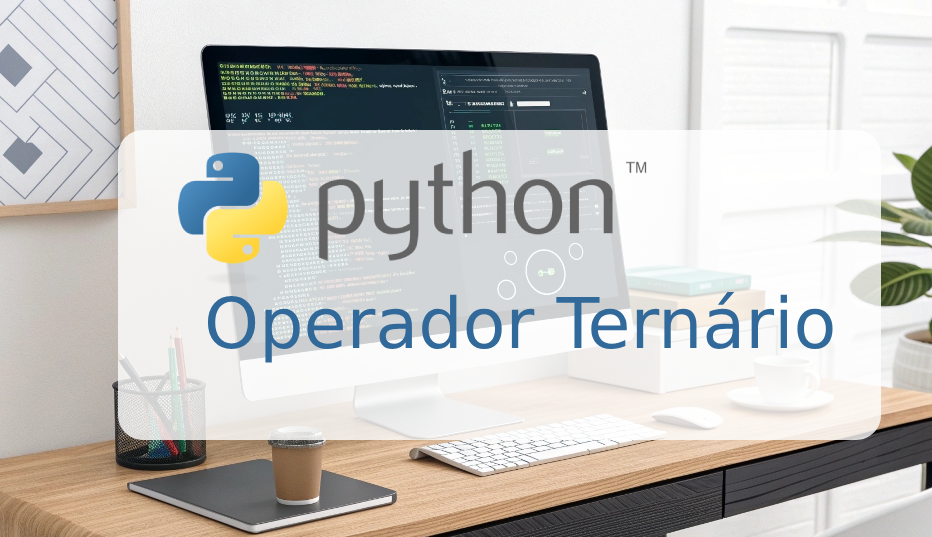
<style>
.page{position:relative;width:932px;height:537px}
.page>*{position:absolute;margin:0}
.t1{font:70px "DejaVuSans";color:#316a9a}
</style>
<div class="page">
<p class="t1" style="left:207px;top:292px;width:626px;height:71px">Operador Ternário</p>
</div>
